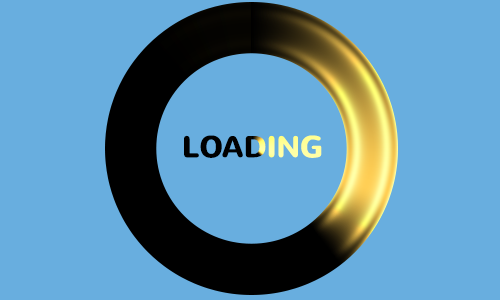
<style>
.page{position:relative;width:500px;height:300px;background:#68aedf}
.page>*{position:absolute;margin:0}
.t1{font:30px "Nunito-Bold";text-transform:uppercase}
</style>
<div class="page">
<p class="t1" style="left:184px;top:135px;width:138px;height:23px">LOADING</p>
</div>
